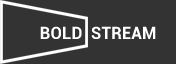
<style>
.page{position:relative;width:176px;height:64px;background:#333333}
.page>*{position:absolute;margin:0}
.t1{font:16.7px "Roboto-Bold";letter-spacing:0.009em;color:#ffffff}
</style>
<div class="page">
<p class="t1" style="left:40px;top:26px;width:116px;height:13px">BOLD  STREAM</p>
</div>
